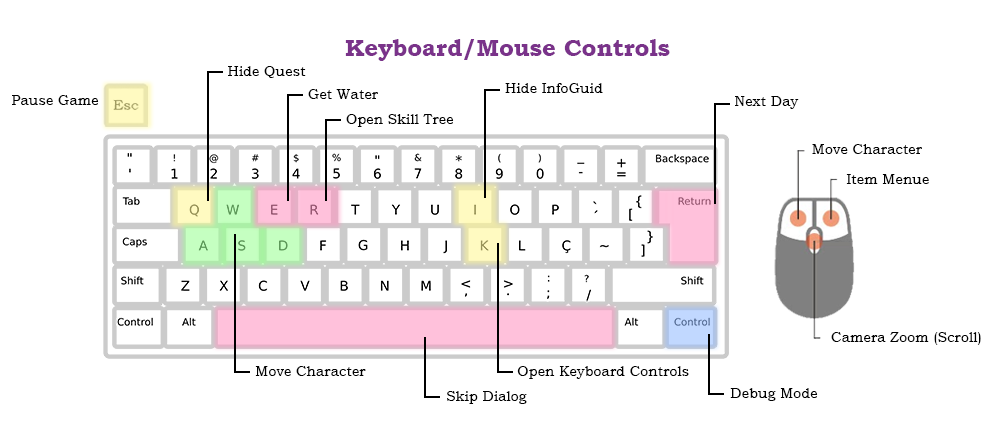
<style>
.page{position:relative;width:1000px;height:427px;background:#ffffff}
.page>*{position:absolute;margin:0}
.t1{font:23.9px "BookmanOldStyle-Bold";color:#7a338a}
.t2{font:14.3px "BookmanOldStyle";color:#000000}
</style>
<div class="page">
<p class="t1" style="left:345px;top:39px;width:325px;height:22px">Keyboard/Mouse Controls</p>
<p class="t2" style="left:228px;top:66px;width:78px;height:12px">Hide Quest</p>
<p class="t2" style="left:308px;top:89px;width:70px;height:10px">Get Water</p>
<p class="t2" style="left:505px;top:83px;width:98px;height:10px">Hide InfoGuid</p>
<p class="t2" style="left:12px;top:95px;width:87px;height:10px">Pause Game</p>
<p class="t2" style="left:735px;top:96px;width:64px;height:13px">Next Day</p>
<p class="t2" style="left:346px;top:114px;width:108px;height:13px">Open Skill Tree</p>
<p class="t2" style="left:812px;top:144px;width:110px;height:10px">Move Character</p>
<p class="t2" style="left:846px;top:174px;width:83px;height:10px">Item Menue</p>
<p class="t2" style="left:831px;top:332px;width:150px;height:13px">Camera Zoom (Scroll)</p>
<p class="t2" style="left:255px;top:366px;width:111px;height:10px">Move Character</p>
<p class="t2" style="left:517px;top:366px;width:172px;height:13px">Open Keyboard Controls</p>
<p class="t2" style="left:730px;top:388px;width:88px;height:13px">Debug Mode</p>
<p class="t2" style="left:447px;top:391px;width:80px;height:13px">Skip Dialog</p>
</div>
